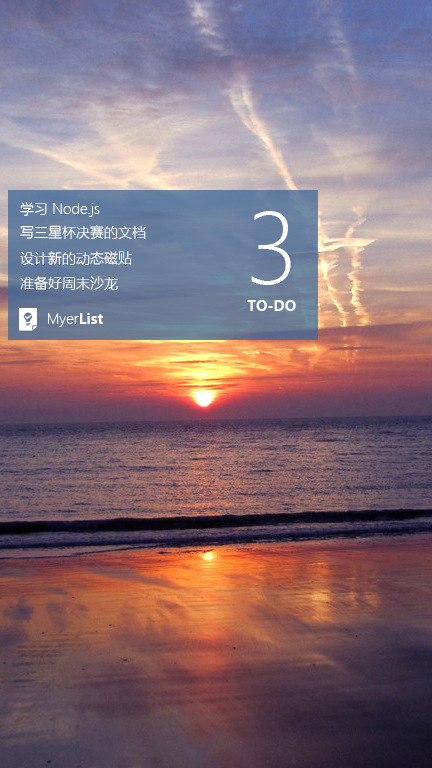
<style>
.page{position:relative;width:432px;height:768px}
.page>*{position:absolute;margin:0}
.t1{font:14px "MicrosoftYaHeiLight";color:#ffffff}
.t2{font:95.4px "MicrosoftYaHeiLight";color:#ffffff}
.t3{font:14px "MicrosoftYaHei-Bold";color:#ffffff}
</style>
<div class="page">
<p class="t1" style="left:20px;top:202px;width:80px;height:15px">学习 Node.js</p>
<p class="t2" style="left:251px;top:211px;width:40px;height:74px">3</p>
<p class="t1" style="left:20px;top:225px;width:126px;height:14px">写三星杯决赛的文档</p>
<p class="t1" style="left:20px;top:251px;width:112px;height:14px">设计新的动态磁贴</p>
<p class="t1" style="left:20px;top:276px;width:98px;height:14px">准备好周末沙龙</p>
<p class="t3" style="left:247px;top:300px;width:49px;height:11px">TO-DO</p>
<p class="t1" style="left:48px;top:313px;width:55px;height:14px">Myer<span class="t3">List</span></p>
</div>
